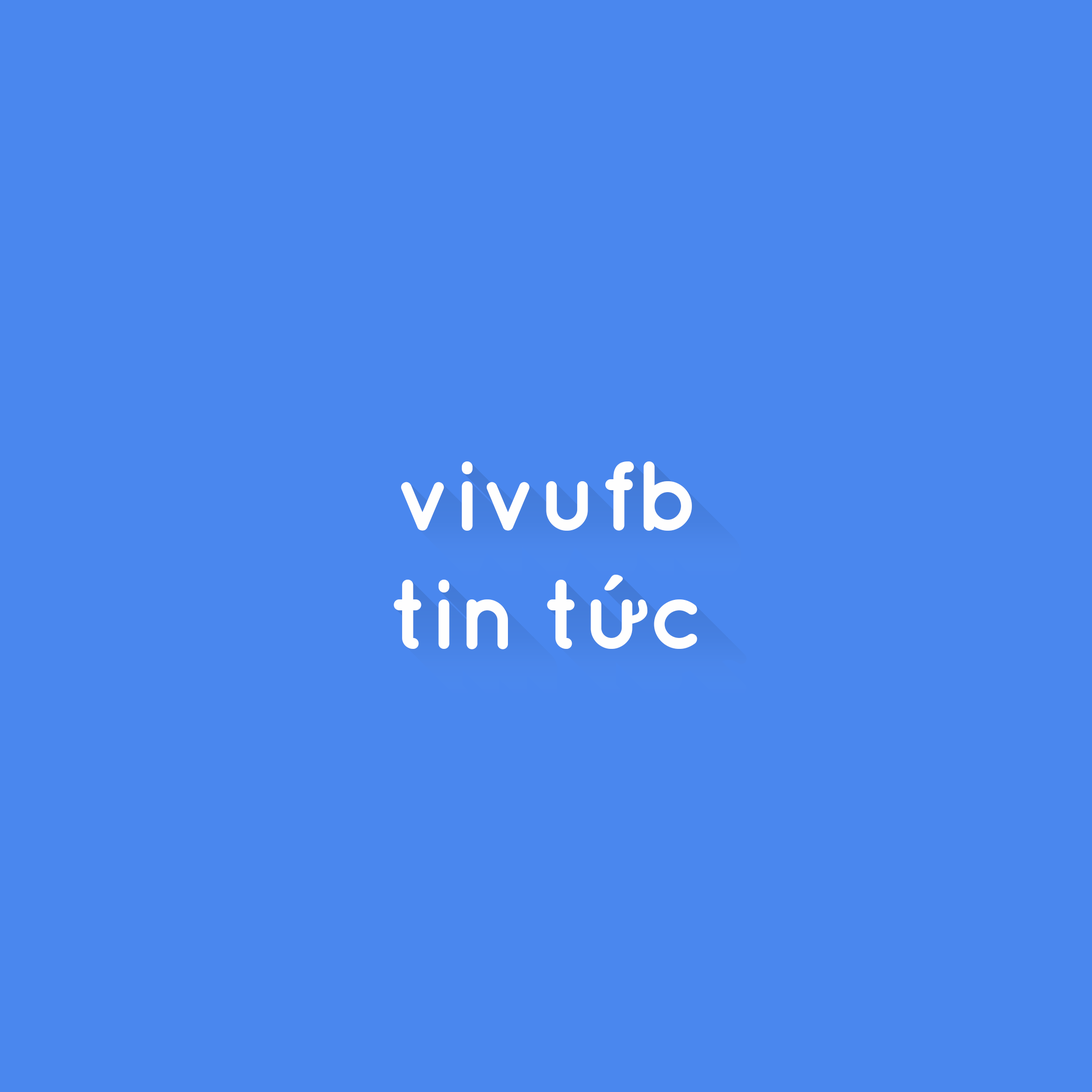
<style>
.page{position:relative;width:1092px;height:1092px;background:#4a87ee}
.page>*{position:absolute;margin:0}
.t1{font:98.9px "VNFQuicksand-Bold";color:#fefefe}
</style>
<div class="page">
<p class="t1" style="left:401px;top:461px;width:291px;height:70px">vivufb</p>
<p class="t1" style="left:394px;top:575px;width:303px;height:74px">tin tức</p>
</div>
